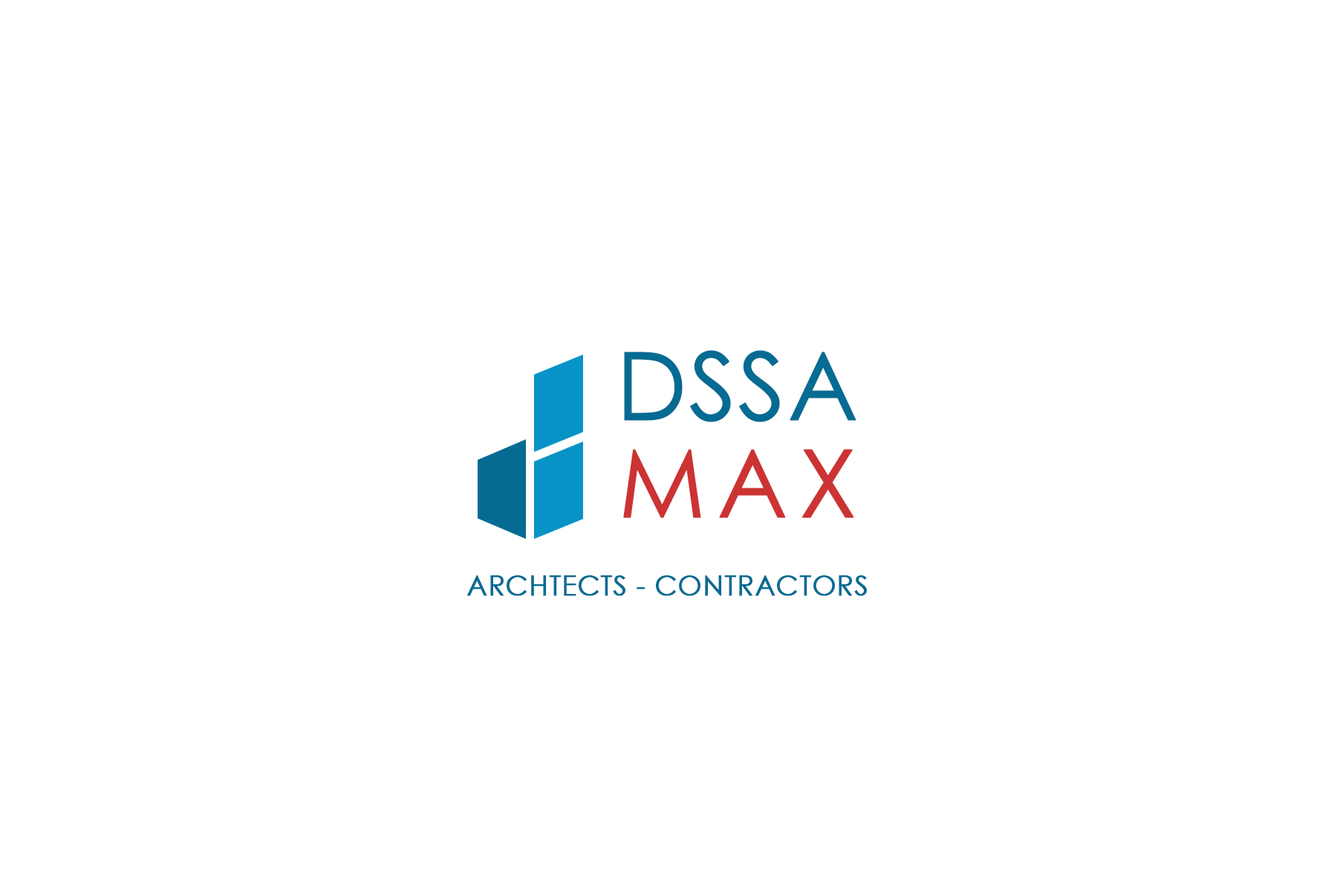
<style>
.page{position:relative;width:1337px;height:892px;background:#ffffff}
.page>*{position:absolute;margin:0}
.t1{font:94.4px "CenturyGothic";color:#056b93;font-weight:bold}
.t2{font:94.4px "CenturyGothic";letter-spacing:0.1em;color:#cc3333;text-transform:uppercase;font-weight:bold}
.t3{font:27.9px "CenturyGothic";color:#056b93;text-transform:uppercase;font-weight:bold}
</style>
<div class="page">
<p class="t1" style="left:624px;top:350px;width:233px;height:72px">DSSA</p>
<p class="t2" style="left:623px;top:449px;width:231px;height:69px">max</p>
<p class="t3" style="left:467px;top:575px;width:400px;height:21px">Archtects - Contractors</p>
</div>
